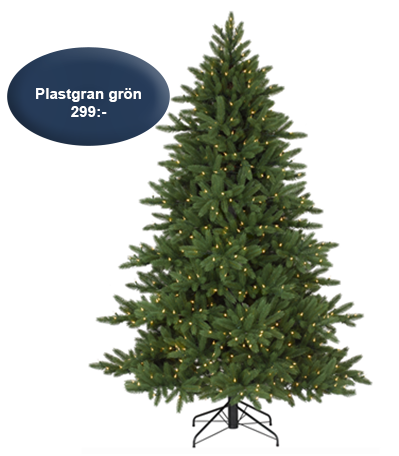
<style>
.page{position:relative;width:399px;height:456px;background:#ffffff}
.page>*{position:absolute;margin:0}
.t1{font:15.1px "Arial-BoldMT";color:#ffffff}
</style>
<div class="page">
<p class="t1" style="left:36px;top:88px;width:105px;height:29px;text-align:center">Plastgran grön<br>299:-</p>
</div>
